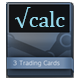
<style>
.page{position:relative;width:80px;height:80px;background:#ffffff}
.page>*{position:absolute;margin:0}
.t1{font:22px "CambriaMath";color:#98dcef}
</style>
<div class="page">
<p class="t1" style="left:15px;top:7px;width:50px;height:21px">√calc</p>
</div>
